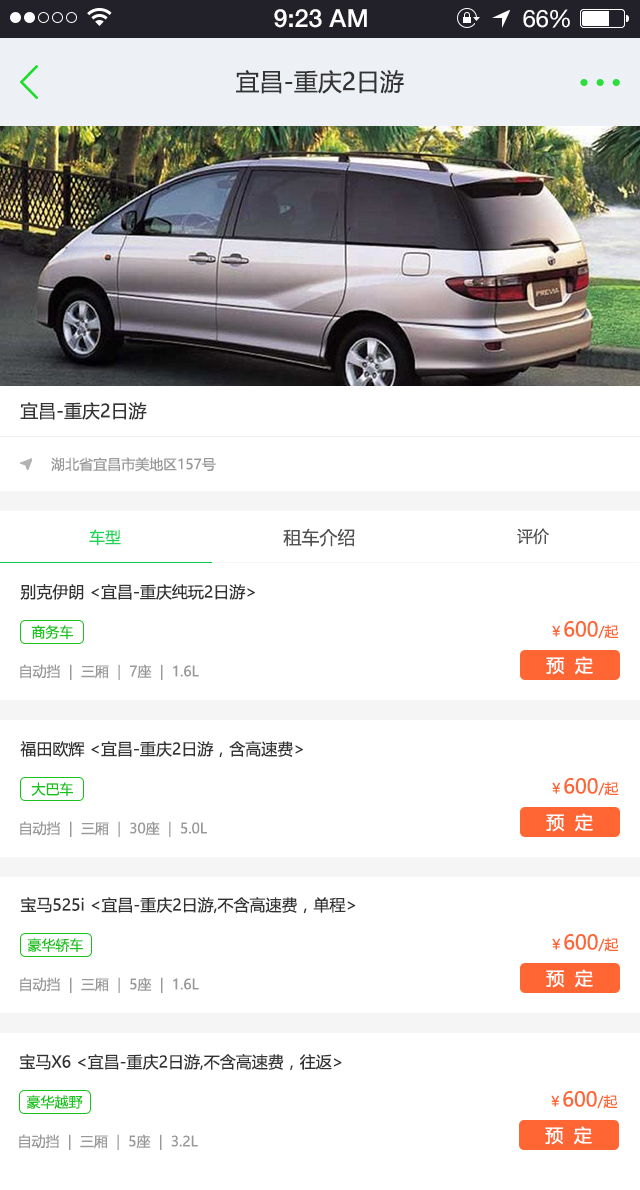
<style>
.page{position:relative;width:640px;height:1190px;background:#ffffff}
.page>*{position:absolute;margin:0}
.t1{font:25px "HelveticaNeue-Medium";color:#ffffff}
.t2{font:24px "HelveticaNeue";color:#ffffff}
.t3{font:24px "HelveticaNeue";letter-spacing:-0.02em;color:#ffffff}
.t4{font:24px "MicrosoftYaHei";color:#333333}
.t5{font:18px "MicrosoftYaHei";color:#333333}
.t6{font:14px "MicrosoftYaHei";color:#999999}
.t7{font:16px "MicrosoftYaHei";color:#1cd755}
.t8{font:18px "MicrosoftYaHei";color:#515252}
.t9{font:16px "MicrosoftYaHei";color:#515252}
.t10{font:16px "MicrosoftYaHei";color:#333333}
.t11{font:14px "MicrosoftYaHei";color:#18c31c}
.t12{font:20px "MicrosoftYaHei";color:#ff6633}
.t13{font:14px "MicrosoftYaHei";color:#ff6633}
.t14{font:18px "MicrosoftYaHei";color:#ffffff}
</style>
<div class="page">
<p class="t1" style="left:274px;top:9px;width:93px;height:19px">9:23 AM</p>
<p class="t2" style="left:523px;top:9px;width:47px;height:19px">6<span class="t3">6</span>%</p>
<p class="t4" style="left:236px;top:70px;width:168px;height:24px">宜昌-重庆2日游</p>
<p class="t5" style="left:20px;top:402px;width:127px;height:18px">宜昌-重庆2日游</p>
<p class="t6" style="left:51px;top:457px;width:165px;height:15px">湖北省宜昌市美地区157号</p>
<p class="t7" style="left:89px;top:529px;width:32px;height:17px">车型</p>
<p class="t8" style="left:283px;top:528px;width:72px;height:19px">租车介绍</p>
<p class="t9" style="left:517px;top:528px;width:32px;height:17px">评价</p>
<p class="t10" style="left:20px;top:584px;width:235px;height:16px">别克伊朗 &lt;宜昌-重庆纯玩2日游&gt;</p>
<p class="t11" style="left:31px;top:625px;width:42px;height:15px">商务车</p>
<p class="t12" style="left:552px;top:621px;width:67px;height:18px"><span class="t13">￥</span>600<span class="t13">/起</span></p>
<p class="t6" style="left:20px;top:664px;width:179px;height:16px">自动挡  |  三厢  |  7座  |  1.6L</p>
<p class="t14" style="left:546px;top:656px;width:47px;height:19px">预  定</p>
<p class="t10" style="left:20px;top:741px;width:283px;height:16px">福田欧辉 &lt;宜昌-重庆2日游，含高速费&gt;</p>
<p class="t11" style="left:31px;top:782px;width:42px;height:14px">大巴车</p>
<p class="t12" style="left:552px;top:778px;width:67px;height:18px"><span class="t13">￥</span>600<span class="t13">/起</span></p>
<p class="t6" style="left:20px;top:821px;width:187px;height:16px">自动挡  |  三厢  |  30座  |  5.0L</p>
<p class="t14" style="left:546px;top:813px;width:47px;height:19px">预  定</p>
<p class="t10" style="left:20px;top:897px;width:336px;height:16px">宝马525i &lt;宜昌-重庆2日游,不含高速费，单程&gt;</p>
<p class="t11" style="left:27px;top:938px;width:56px;height:14px">豪华轿车</p>
<p class="t12" style="left:552px;top:934px;width:67px;height:18px"><span class="t13">￥</span>600<span class="t13">/起</span></p>
<p class="t6" style="left:20px;top:977px;width:179px;height:16px">自动挡  |  三厢  |  5座  |  1.6L</p>
<p class="t14" style="left:546px;top:969px;width:47px;height:19px">预  定</p>
<p class="t10" style="left:19px;top:1054px;width:323px;height:16px">宝马X6 &lt;宜昌-重庆2日游,不含高速费，往返&gt;</p>
<p class="t11" style="left:26px;top:1095px;width:57px;height:14px">豪华越野</p>
<p class="t12" style="left:551px;top:1091px;width:67px;height:18px"><span class="t13">￥</span>600<span class="t13">/起</span></p>
<p class="t6" style="left:19px;top:1134px;width:179px;height:16px">自动挡  |  三厢  |  5座  |  3.2L</p>
<p class="t14" style="left:545px;top:1126px;width:47px;height:19px">预  定</p>
</div>
